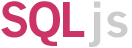
<style>
.page{position:relative;width:132px;height:48px;background:#ffffff}
.page>*{position:absolute;margin:0}
.t1{font:46.7px "NewsGothicMT-Bold";letter-spacing:-0.06em;color:#cc3366}
.t2{font:46.7px "NewsGothicMT-Bold";color:#cc3366}
.t3{font:46.7px "NewsGothicMT-Bold";color:#cccccc}
</style>
<div class="page">
<p class="t1" style="left:1px;top:1px;width:127px;height:46px">SQ<span class="t2">L</span><span class="t3">js</span></p>
</div>
